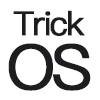
<style>
.page{position:relative;width:100px;height:100px;background:#ffffff}
.page>*{position:absolute;margin:0}
.t1{font:33.3px/29.2px "PingFangSC-Regular";letter-spacing:-0.08em;color:#1d1d1f;font-weight:bold}
.t2{font:62.5px/29.2px "PingFangSC-Regular";letter-spacing:-0.08em;color:#1d1d1f;font-weight:bold}
</style>
<div class="page">
<p class="t1" style="left:8px;top:10px;width:83px;height:81px;text-align:center">Trick<br><span class="t2">OS</span></p>
</div>
